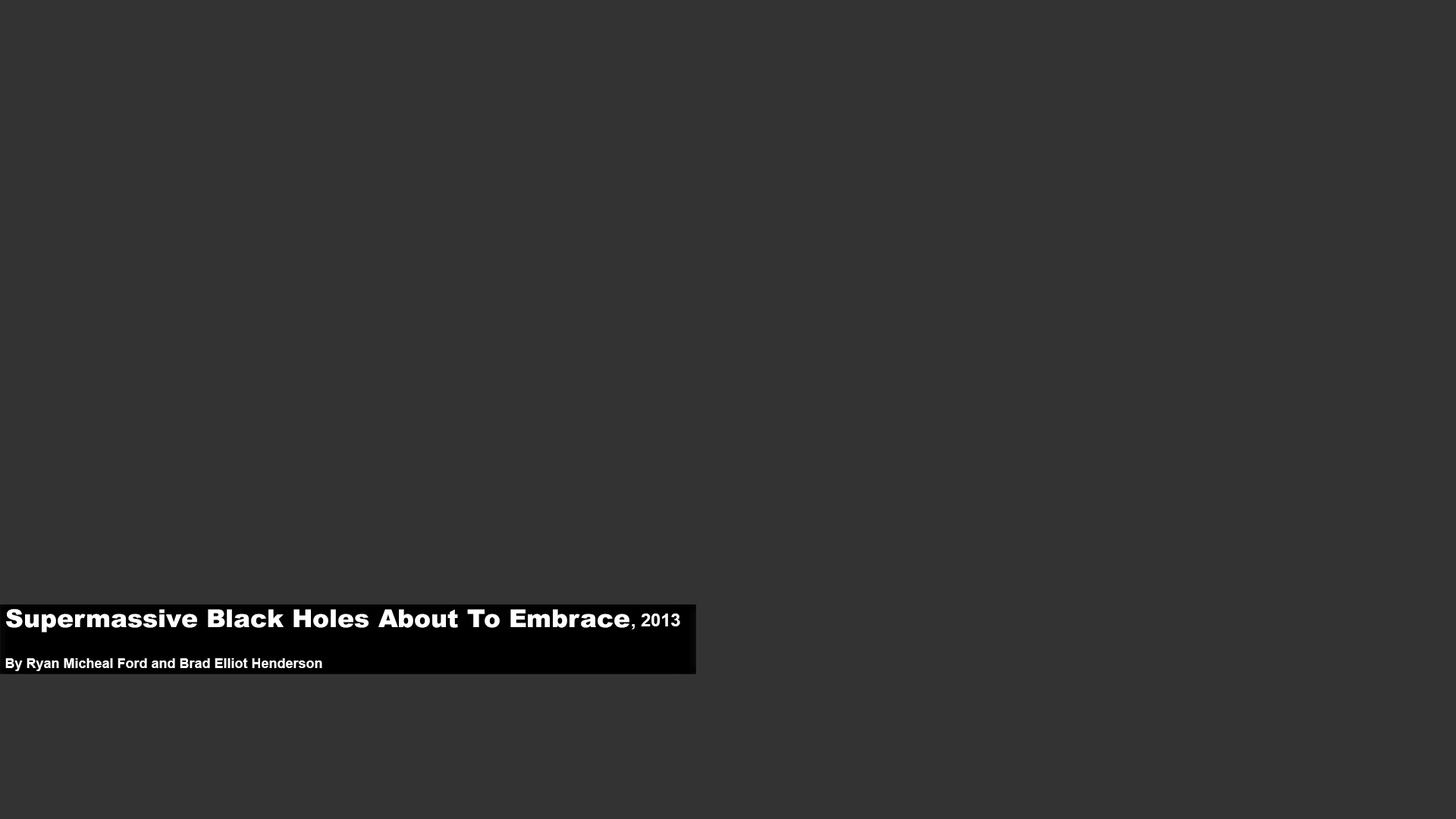
<style>
.page{position:relative;width:1456px;height:819px;background:#333333}
.page>*{position:absolute;margin:0}
.t1{font:24.7px "Arial-Black";color:#ffffff}
.t2{font:17.7px "Arial-BoldMT";color:#ffffff}
.t3{font:13.7px "Arial-BoldMT";color:#ffffff}
</style>
<div class="page">
<p class="t1" style="left:6px;top:609px;width:623px;height:23px">Supermassive Black Holes About To Embrace</p>
<p class="t2" style="left:632px;top:613px;width:48px;height:16px">, 2013</p>
<p class="t3" style="left:5px;top:658px;width:317px;height:13px">By Ryan Micheal Ford and Brad Elliot Henderson</p>
</div>
